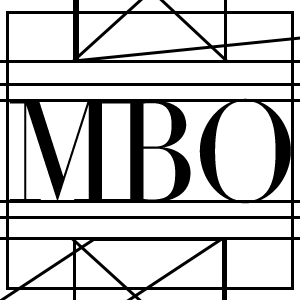
<style>
.page{position:relative;width:300px;height:300px;background:#ffffff}
.page>*{position:absolute;margin:0}
.t1{font:139.8px "Didot";letter-spacing:-0.06em;color:#000000;scale:0.93 1}
</style>
<div class="page">
<p class="t1" style="left:9px;top:98px;width:282px;height:106px">MBO</p>
</div>
